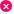
<style>
.page{position:relative;width:14px;height:14px;background:#ffffff}
.page>*{position:absolute;margin:0}
.t1{font:10px "MicrosoftYaHei";letter-spacing:0.025em;color:#ffffff;scale:1.21 1}
</style>
<div class="page">
<p class="t1" style="left:3px;top:4px;width:6px;height:5px">x</p>
</div>
